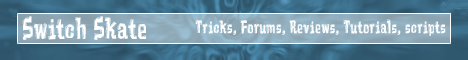
<style>
.page{position:relative;width:468px;height:60px}
.page>*{position:absolute;margin:0}
.t1{font:24px "Vademecum";letter-spacing:0.05em;color:#ffffff;scale:0.83 1}
.t2{font:14.4px "Vademecum";letter-spacing:0.05em;color:#ffffff;scale:0.83 1}
</style>
<div class="page">
<p class="t1" style="left:22px;top:16px;width:125px;height:24px">Switch Skate</p>
<p class="t2" style="left:195px;top:19px;width:251px;height:17px">Tricks, Forums, Reviews, Tutorials, scripts</p>
</div>
